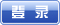
<style>
.page{position:relative;width:60px;height:25px}
.page>*{position:absolute;margin:0}
.t1{font:14.1px "JZhongYi";letter-spacing:0.2em;color:#ffffff}
</style>
<div class="page">
<p class="t1" style="left:12px;top:5px;width:37px;height:14px">登 录</p>
</div>
